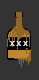
<style>
.page{position:relative;width:39px;height:80px;background:#333333}
.page>*{position:absolute;margin:0}
.t1{font:10px "DevanagariSangamMN";color:#ffffff}
</style>
<div class="page">
<p class="t1" style="left:9px;top:41px;width:19px;height:5px">x x x</p>
</div>
